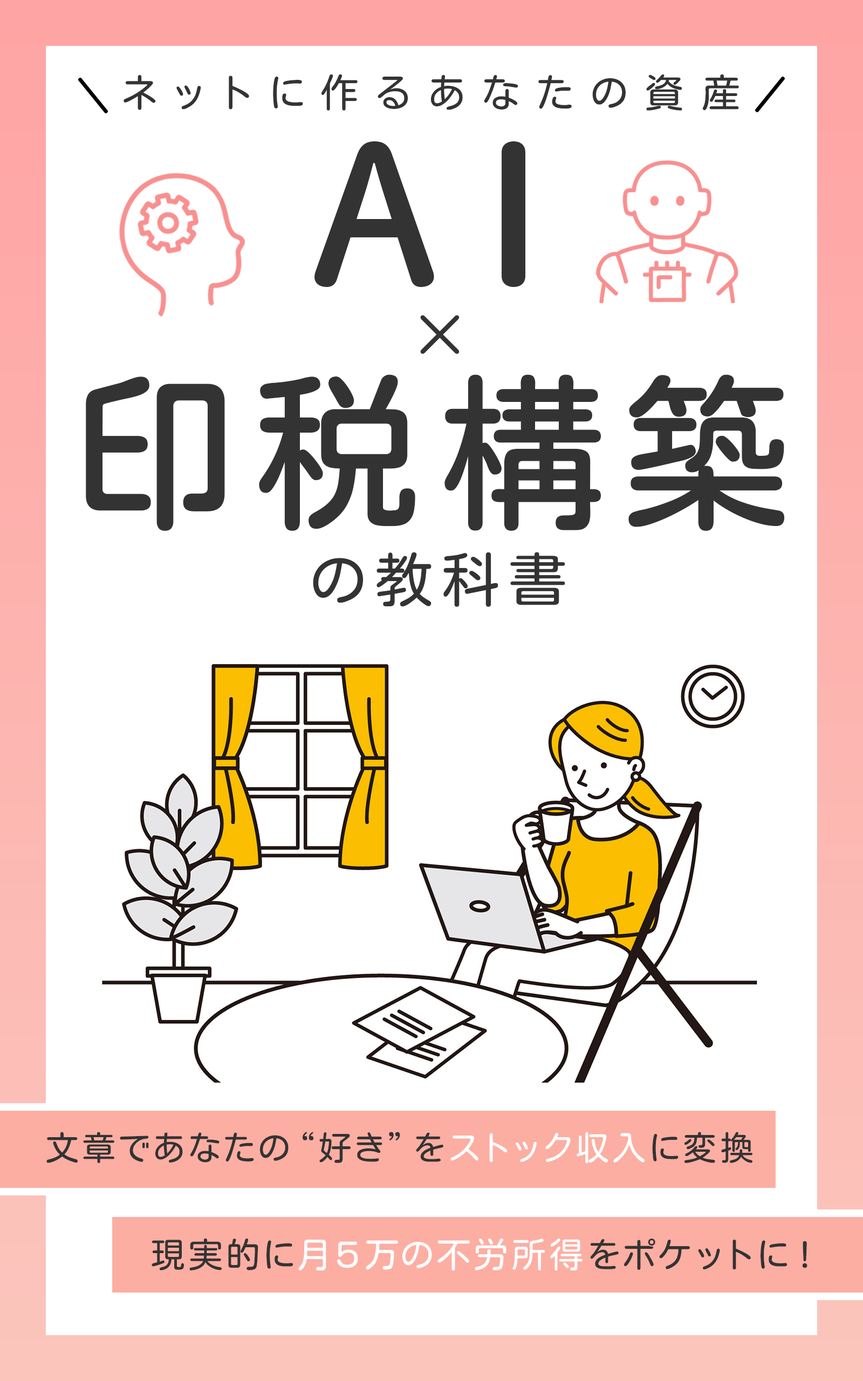
<style>
.page{position:relative;width:863px;height:1381px;background:#ffffff}
.page>*{position:absolute;margin:0}
.t1{font:39.2px "KosugiMaru-Regular";letter-spacing:0.46em;color:#333333}
.t2{font:188.8px "DNPShueiMGoStd-B";letter-spacing:0.25em;color:#333333}
.t3{font:65.2px "KosugiMaru-Regular";letter-spacing:0.12em;color:#333333}
.t4{font:167.3px "KosugiMaru-Regular";letter-spacing:0.12em;color:#333333;font-weight:bold}
.t5{font:59.2px "KosugiMaru-Regular";letter-spacing:0.16em;color:#333333}
.t6{font:33.7px "KosugiMaru-Regular";letter-spacing:0.12em;color:#333333}
.t7{font:33.7px "KosugiMaru-Regular";letter-spacing:0.17em;color:#333333}
.t8{font:33.7px "KosugiMaru-Regular";letter-spacing:0.12em;color:#ffffff}
.t9{font:33.7px "KosugiMaru-Regular";letter-spacing:0.16em;color:#ffffff}
.t10{font:34.8px "KosugiMaru-Regular";letter-spacing:0.12em;color:#333333}
.t11{font:34.8px "KosugiMaru-Regular";letter-spacing:0.12em;color:#ffffff}
.t12{font:34.8px "KosugiMaru-Regular";letter-spacing:0.16em;color:#ffffff}
.t13{font:34.8px "KosugiMaru-Regular";letter-spacing:0.3em;color:#333333}
.t14{font:34.8px "KosugiMaru-Regular";letter-spacing:0.22em;color:#333333}
</style>
<div class="page">
<p class="t1" style="left:124px;top:74px;width:615px;height:37px">ネットに作るあなたの資産</p>
<p class="t2" style="left:315px;top:141px;width:211px;height:146px">AI</p>
<p class="t3" style="left:420px;top:315px;width:40px;height:39px">×</p>
<p class="t4" style="left:86px;top:374px;width:699px;height:157px">印税構築</p>
<p class="t5" style="left:313px;top:552px;width:252px;height:55px">の教科書</p>
<p class="t6" style="left:46px;top:1132px;width:707px;height:31px">文章であなたの“好き”<span class="t7">を</span><span class="t8">ストック収</span><span class="t9">入</span>に変換</p>
<p class="t10" style="left:152px;top:1238px;width:656px;height:33px">現実的に<span class="t11">月５万の</span><span class="t12">不労所得</span>をポケット<span class="t13">に</span><span class="t14">!</span></p>
</div>
